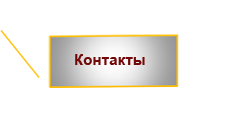
<style>
.page{position:relative;width:225px;height:114px;background:#ffffff}
.page>*{position:absolute;margin:0}
.t1{font:15.2px "Arial-BoldMT";color:#720909}
</style>
<div class="page">
<p class="t1" style="left:75px;top:54px;width:70px;height:11px">Контакты</p>
</div>
